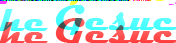
<style>
.page{position:relative;width:176px;height:43px;background:#ffffff}
.page>*{position:absolute;margin:0}
.t1{font:37.3px "Magneto-Bold"}
</style>
<div class="page">
<p class="t1" style="left:7px;top:5px;width:169px;height:30px">Gesuche</p>
</div>
